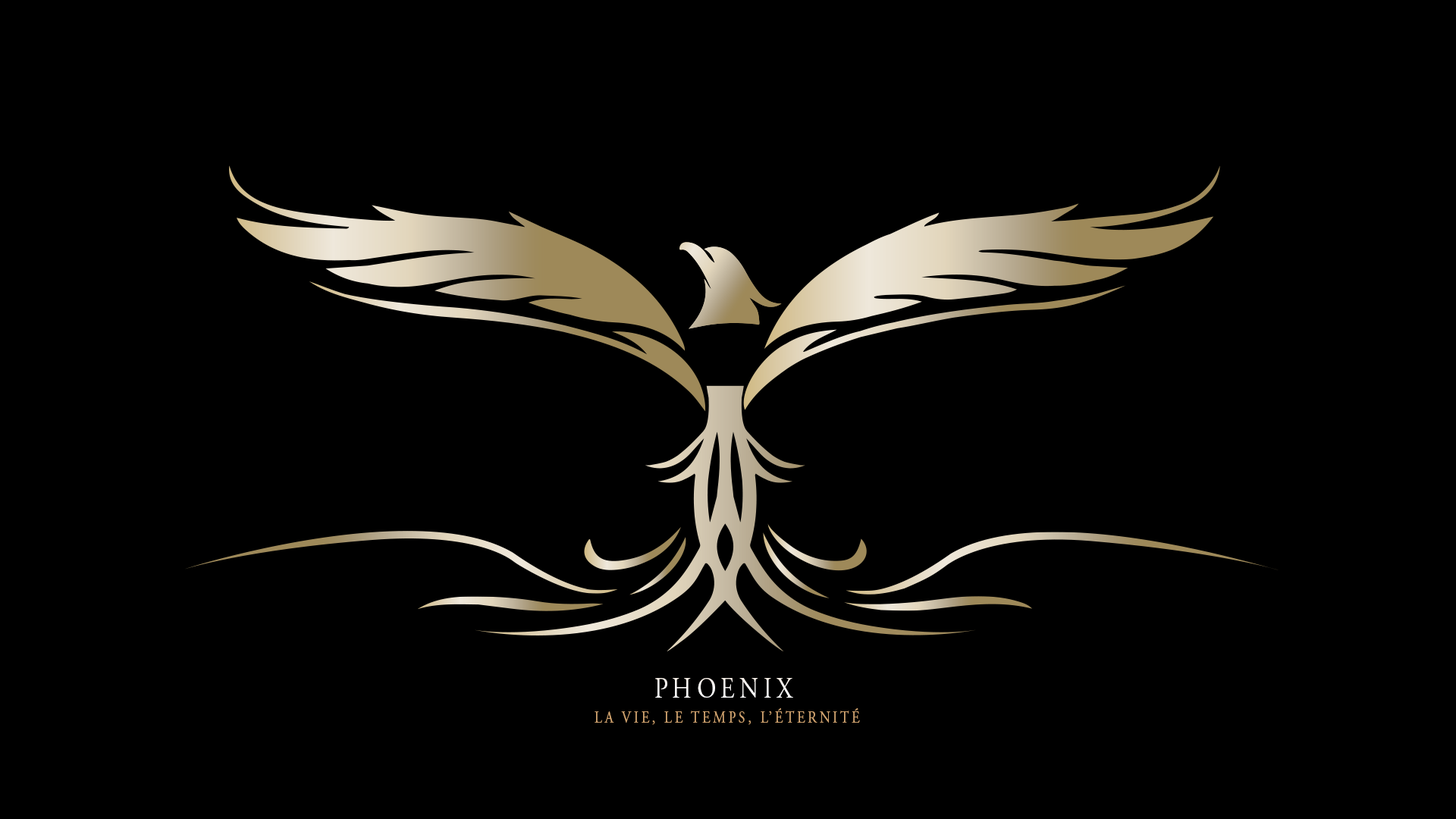
<style>
.page{position:relative;width:1456px;height:819px;background:#000000}
.page>*{position:absolute;margin:0}
.t1{font:29.1px "AGaramondPro-Regular";letter-spacing:0.2em;color:#ffffff;text-transform:uppercase;scale:0.83 1}
.t2{font:16.4px "AGaramondPro-Regular";letter-spacing:0.2em;color:#d0a36f;text-transform:uppercase;scale:0.83 1}
</style>
<div class="page">
<p class="t1" style="left:655px;top:678px;width:138px;height:20px">Phoenix</p>
<p class="t2" style="left:595px;top:708px;width:265px;height:17px">lA VIE, LE TEMPS, l’éternité</p>
</div>
